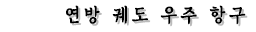
<style>
.page{position:relative;width:256px;height:32px;background:#ffffff}
.page>*{position:absolute;margin:0}
.t1{font:20px "KoreanGUGS-M";letter-spacing:0.2em;color:#000000;scale:0.9 1}
</style>
<div class="page">
<p class="t1" style="left:66px;top:5px;width:180px;height:20px">연방 궤도 우주 항구</p>
</div>
